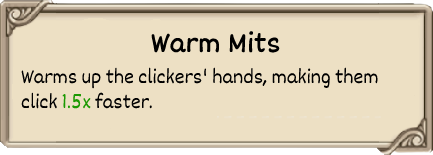
<style>
.page{position:relative;width:433px;height:155px;background:#ede0c4}
.page>*{position:absolute;margin:0}
.t1{font:30px "Dekko";color:#000000;font-weight:bold}
.t2{font:21px "Dekko";color:#000000}
.t3{font:21px "Dekko";color:#1b9902}
</style>
<div class="page">
<p class="t1" style="left:151px;top:31px;width:129px;height:22px">Warm Mits</p>
<p class="t2" style="left:21px;top:67px;width:357px;height:42px">Warms up the clickers' hands, making them<br>click <span class="t3">1.5x </span>faster.</p>
</div>
